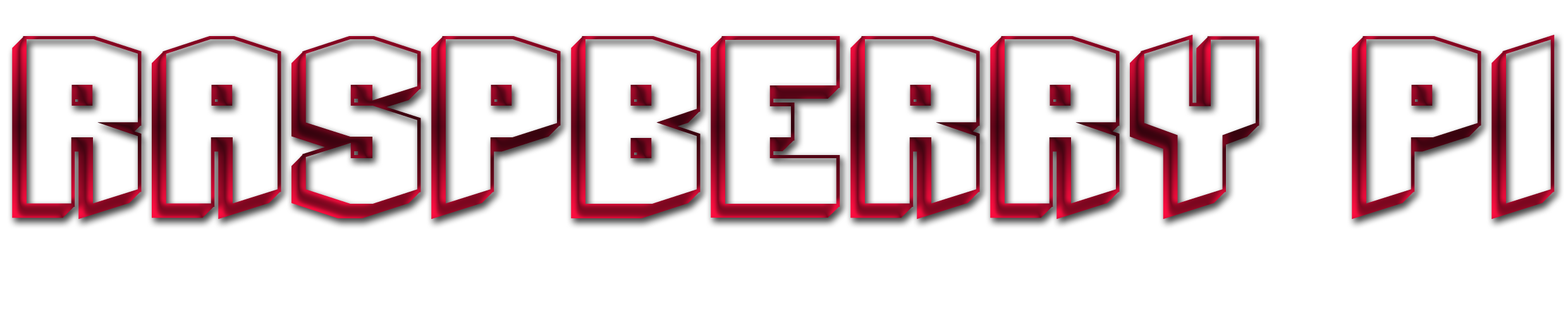
<style>
.page{position:relative;width:1568px;height:336px;background:#ffffff}
.page>*{position:absolute;margin:0}
.t1{font:164.4px "BeyondControl"}
</style>
<div class="page">
<p class="t1" style="left:12px;top:35px;width:1543px;height:184px">RASPBERRY PI</p>
</div>
